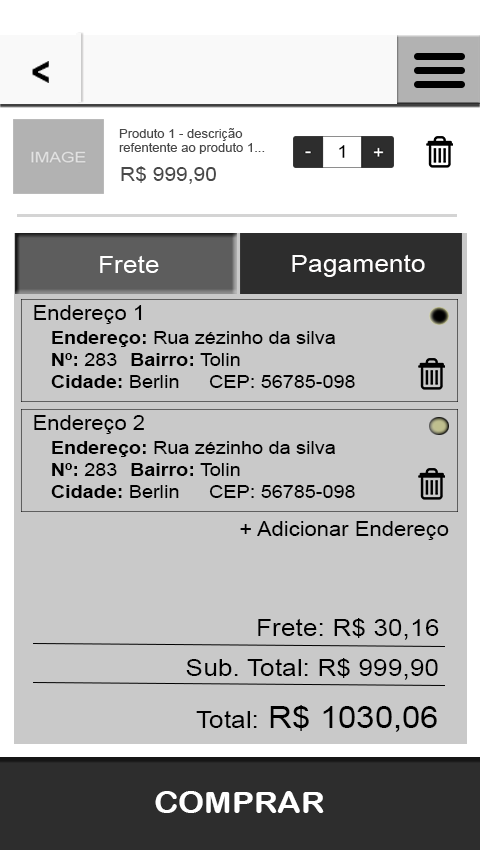
<style>
.page{position:relative;width:480px;height:850px;background:#c9c9c9}
.page>*{position:absolute;margin:0}
.t1{font:11.8px "ArialMT";color:#494949;scale:1.11 1}
.t2{font:19.4px "ArialMT";color:#494949;scale:1.08 1}
.t3{font:24px "ArialMT";color:#fffefe;scale:1.1 1}
.t4{font:20px "ArialMT";color:#000000;scale:1.1 1}
.t5{font:18px "ArialMT";color:#000000;scale:1.1 1}
.t6{font:18px "Arial-BoldMT";color:#000000;scale:1.1 1}
.t7{font:24px "ArialMT";color:#000000;scale:1.1 1}
.t8{font:30px "ArialMT";color:#000000;scale:1.1 1}
.t9{font:30px "ArialRoundedMTBold";color:#ffffff;scale:1.1 1}
</style>
<div class="page">
<p class="t1" style="left:119px;top:128px;width:146px;height:26px">Produto 1 - descrição<br>refentente ao produto 1...</p>
<p class="t2" style="left:121px;top:166px;width:95px;height:18px">R$ 999,90</p>
<p class="t3" style="left:100px;top:255px;width:59px;height:18px">Frete</p>
<p class="t3" style="left:292px;top:254px;width:133px;height:23px">Pagamento</p>
<p class="t4" style="left:34px;top:305px;width:108px;height:19px">Endereço 1</p>
<p class="t5" style="left:51px;top:331px;width:304px;height:57px"><span class="t6">Endereço:</span> Rua zézinho da silva<br><span class="t6">Nº:</span> 283 <span class="t6">Bairro:</span> Tolin<br><span class="t6">Cidade:</span> Berlin CEP: 56785-098</p>
<p class="t4" style="left:34px;top:415px;width:110px;height:19px">Endereço 2</p>
<p class="t5" style="left:51px;top:441px;width:304px;height:57px"><span class="t6">Endereço:</span> Rua zézinho da silva<br><span class="t6">Nº:</span> 283 <span class="t6">Bairro:</span> Tolin<br><span class="t6">Cidade:</span> Berlin CEP: 56785-098</p>
<p class="t4" style="left:240px;top:521px;width:209px;height:19px">+ Adicionar Endereço</p>
<p class="t7" style="left:258px;top:618px;width:181px;height:22px">Frete: R$ 30,16</p>
<p class="t7" style="left:186px;top:658px;width:252px;height:22px">Sub. Total: R$ 999,90</p>
<p class="t8" style="left:196px;top:705px;width:241px;height:27px"><span class="t7">Total:</span> R$ 1030,06</p>
<p class="t9" style="left:155px;top:791px;width:169px;height:22px">COMPRAR</p>
</div>
